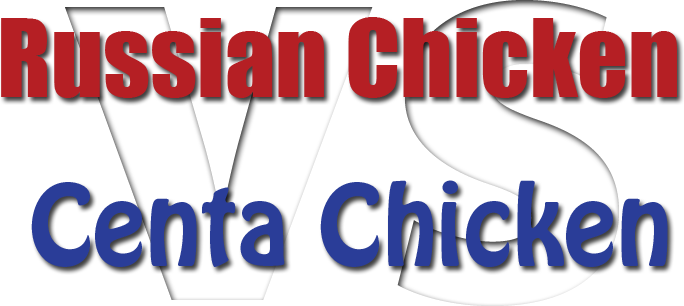
<style>
.page{position:relative;width:684px;height:306px;background:#ffffff}
.page>*{position:absolute;margin:0}
.t1{font:100px "Impact";color:#b51f24}
.t2{font:100px "HoboStd";color:#2a3d98}
</style>
<div class="page">
<p class="t1" style="left:1px;top:17px;width:676px;height:81px">Russian Chicken</p>
<p class="t2" style="left:31px;top:180px;width:637px;height:87px">Centa Chicken</p>
</div>
